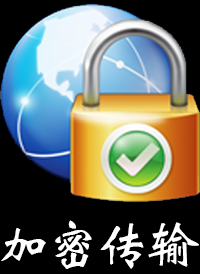
<style>
.page{position:relative;width:200px;height:274px;background:#000000}
.page>*{position:absolute;margin:0}
.t1{font:55px "STXinwei";letter-spacing:-0.105em;color:#ffffff}
</style>
<div class="page">
<p class="t1" style="left:1px;top:220px;width:198px;height:49px">加密传输</p>
</div>
